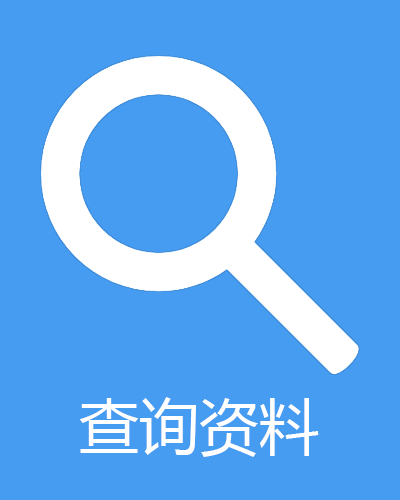
<style>
.page{position:relative;width:400px;height:500px;background:#469cf1}
.page>*{position:absolute;margin:0}
.t1{font:60px "MicrosoftYaHei";color:#ffffff}
</style>
<div class="page">
<p class="t1" style="left:79px;top:397px;width:240px;height:60px">查询资料</p>
</div>
